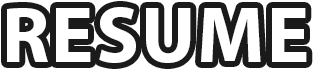
<style>
.page{position:relative;width:313px;height:70px;background:#ffffff}
.page>*{position:absolute;margin:0}
.t1{font:79.9px "MyriadPro-Bold";letter-spacing:0.025em;color:#ffffff}
</style>
<div class="page">
<p class="t1" style="left:7px;top:7px;width:300px;height:56px">RESUME</p>
</div>
